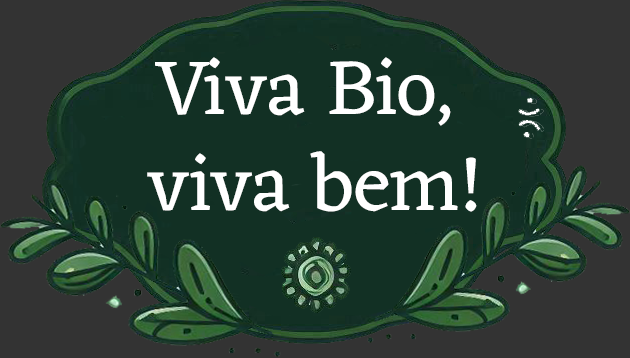
<style>
.page{position:relative;width:630px;height:358px;background:#333333}
.page>*{position:absolute;margin:0}
.t1{font:80px "Eczar-Regular";color:#ffffff}
</style>
<div class="page">
<p class="t1" style="left:147px;top:57px;width:330px;height:155px;text-align:center">Viva Bio,<br> viva bem!</p>
</div>
